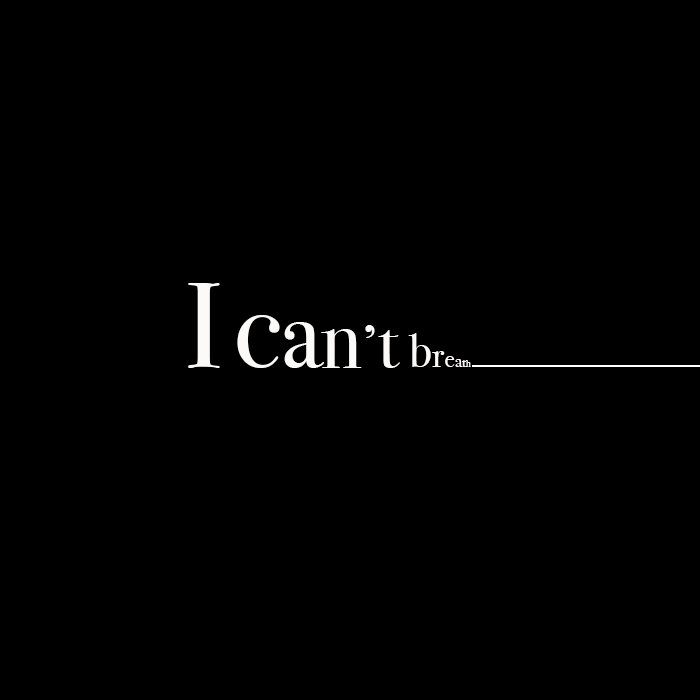
<style>
.page{position:relative;width:700px;height:700px;background:#000000}
.page>*{position:absolute;margin:0}
.t1{font:120px "BodoniSvtyTwoITCTT-Book";color:#fcfaf9}
.t2{font:115px "BodoniSvtyTwoITCTT-Book";color:#fcfaf9}
.t3{font:100px "BodoniSvtyTwoITCTT-Book";color:#fcfaf9}
.t4{font:85px "BodoniSvtyTwoITCTT-Book";color:#fcfaf9}
.t5{font:60px "BodoniSvtyTwoITCTT-Book";color:#fcfaf9}
.t6{font:72px "BodoniSvtyTwoITCTT-Book";color:#fcfaf9}
.t7{font:48px "BodoniSvtyTwoITCTT-Book";color:#fcfaf9}
.t8{font:36px "BodoniSvtyTwoITCTT-Book";color:#fcfaf9}
.t9{font:24px "BodoniSvtyTwoITCTT-Book";color:#fcfaf9}
.t10{font:18px "BodoniSvtyTwoITCTT-Book";color:#fcfaf9}
.t11{font:14px "BodoniSvtyTwoITCTT-Book";color:#fcfaf9}
.t12{font:10px "BodoniSvtyTwoITCTT-Book";color:#fcfaf9}
</style>
<div class="page">
<p class="t1" style="left:188px;top:283px;width:283px;height:85px">I <span class="t2">c</span><span class="t3">a</span><span class="t4">n</span><span class="t5">’</span><span class="t6">t </span><span class="t7">b</span><span class="t8">r</span><span class="t9">e</span><span class="t10">a</span><span class="t11">t</span><span class="t12">h</span></p>
</div>
